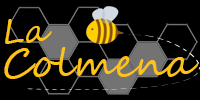
<style>
.page{position:relative;width:200px;height:100px;background:#000000}
.page>*{position:absolute;margin:0}
.t1{font:33px "SegoeScript";color:#ffc318}
.t2{font:40.3px "SegoeScript";color:#ffc318}
</style>
<div class="page">
<p class="t1" style="left:5px;top:19px;width:47px;height:25px">La</p>
<p class="t2" style="left:4px;top:47px;width:195px;height:32px">Colmena</p>
</div>
